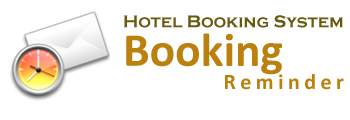
<style>
.page{position:relative;width:350px;height:120px;background:#ffffff}
.page>*{position:absolute;margin:0}
.t1{font:17.7px "CopperplateGothic-Bold";color:#69590f}
.t2{font:47.5px "Calibri-Bold";color:#bb800e}
.t3{font:22.1px "Calibri-Bold";letter-spacing:0.2em;color:#bb800e}
</style>
<div class="page">
<p class="t1" style="left:124px;top:15px;width:219px;height:13px">Hotel Booking System</p>
<p class="t2" style="left:126px;top:33px;width:156px;height:42px">Booking</p>
<p class="t3" style="left:225px;top:74px;width:119px;height:16px">Reminder</p>
</div>
